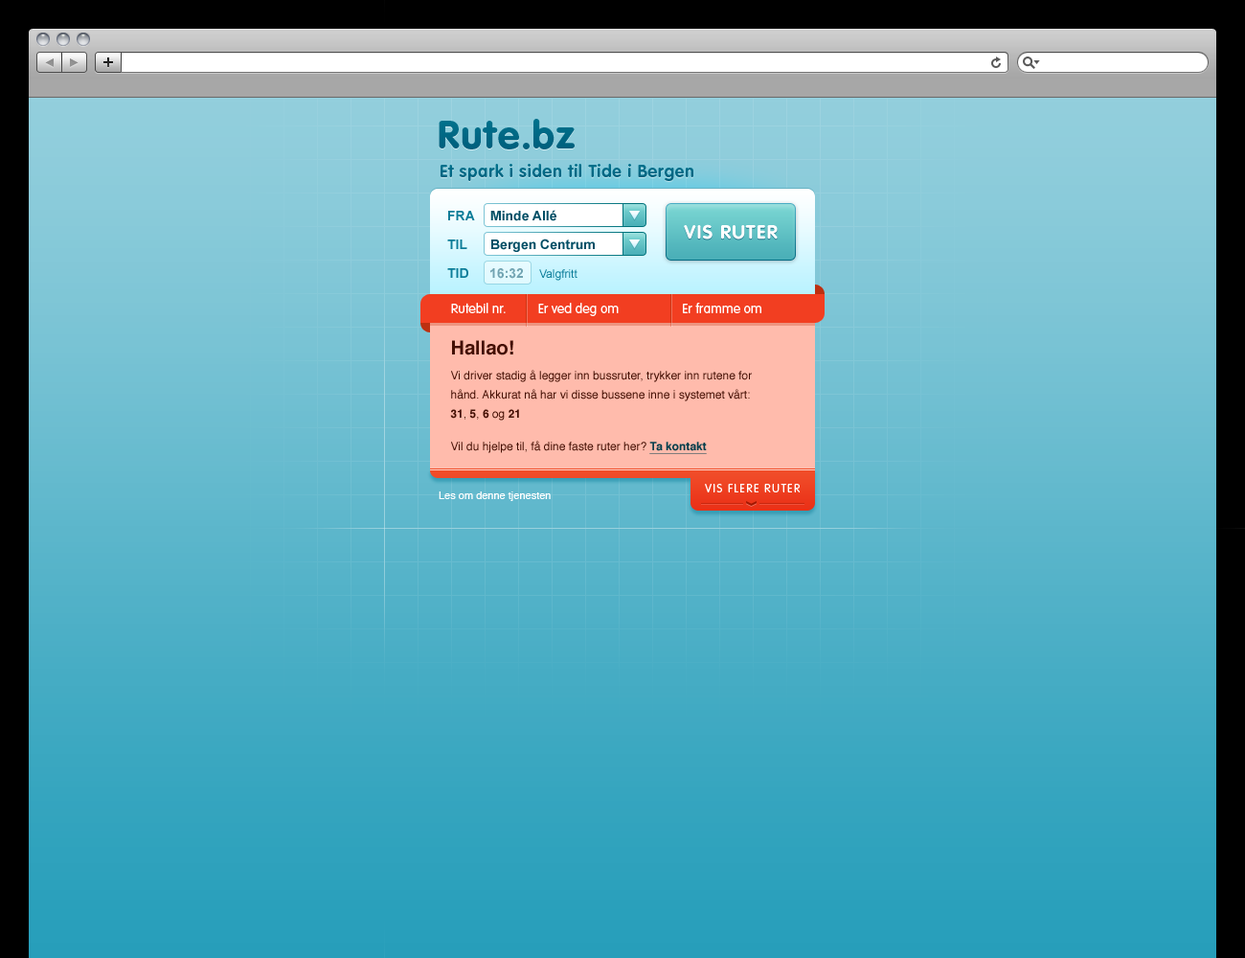
<style>
.page{position:relative;width:1245px;height:958px}
.page>*{position:absolute;margin:0}
.t1{font:38.3px "VAGRoundedStd-Black";letter-spacing:0.04em;color:#00718c}
.t2{font:17.2px "VAGRoundedStd-Bold";letter-spacing:0.04em;color:#00718c}
.t3{font:13.4px "Arial-BoldMT";color:#004e65}
.t4{font:13.4px "Arial-BoldMT";color:#0b7c98;text-transform:uppercase}
.t5{font:19.2px "VAGRoundedStd-Bold";letter-spacing:0.06em;color:#ffffff;text-transform:uppercase}
.t6{font:13.4px "Arial-BoldMT";color:#0b7d99;text-transform:uppercase}
.t7{font:13.4px "Arial-BoldMT";color:#71a4b2}
.t8{font:11.5px "ArialMT";color:#0b7d99}
.t9{font:13.4px "VAGRoundedStd-Light";color:#ffffff}
.t10{font:11.5px/24.9px "Helvetica";color:#430f03}
.t11{font:19.2px "Helvetica-Bold";color:#430f03}
.t12{font:11.5px/19.2px "Helvetica";color:#430f03}
.t13{font:11.5px/19.2px "Helvetica-Bold";color:#430f03}
.t14{font:11.5px/19.2px "Helvetica-Bold";color:#023e4c;text-decoration:underline}
.t15{font:11.5px "VAGRoundedStd-Light";letter-spacing:0.12em;color:#ffffff;text-transform:uppercase}
.t16{font:10.5px "Helvetica";color:#ffffff}
</style>
<div class="page">
<p class="t1" style="left:439px;top:119px;width:136px;height:30px">Rute.bz</p>
<p class="t2" style="left:441px;top:164px;width:252px;height:17px">Et spark i siden til Tide i Bergen</p>
<p class="t3" style="left:490px;top:210px;width:66px;height:11px">Minde Allé</p>
<p class="t4" style="left:448px;top:211px;width:27px;height:9px">Fra</p>
<p class="t5" style="left:684px;top:224px;width:94px;height:15px">Vis ruter</p>
<p class="t6" style="left:447px;top:239px;width:20px;height:10px">Til</p>
<p class="t3" style="left:491px;top:238px;width:104px;height:14px">Bergen Centrum</p>
<p class="t6" style="left:447px;top:268px;width:21px;height:10px">Tid</p>
<p class="t7" style="left:490px;top:268px;width:33px;height:11px">16:32</p>
<p class="t8" style="left:539px;top:269px;width:39px;height:12px">Valgfritt</p>
<p class="t9" style="left:451px;top:303px;width:55px;height:10px">Rutebil nr.</p>
<p class="t9" style="left:538px;top:303px;width:81px;height:13px">Er ved deg om</p>
<p class="t9" style="left:683px;top:303px;width:78px;height:10px">Er framme om</p>
<p class="t10" style="left:450px;top:340px;width:302px;height:114px"><span class="t11">Hallao!<br></span>Vi driver stadig å legger inn bussruter, trykker inn rutene for <span class="t12">hånd. Akkurat nå har vi disse bussene inne i systemet vårt:<br></span><span class="t13">31</span><span class="t12">, </span><span class="t13">5</span><span class="t12">, </span><span class="t13">6</span><span class="t12"> og </span><span class="t13">21<br><br></span><span class="t12">Vil du hjelpe til, få dine faste ruter her? </span><span class="t14">Ta kontakt</span></p>
<p class="t15" style="left:705px;top:484px;width:96px;height:8px">Vis flere ruter</p>
<p class="t16" style="left:439px;top:491px;width:112px;height:10px">Les om denne tjenesten</p>
</div>
